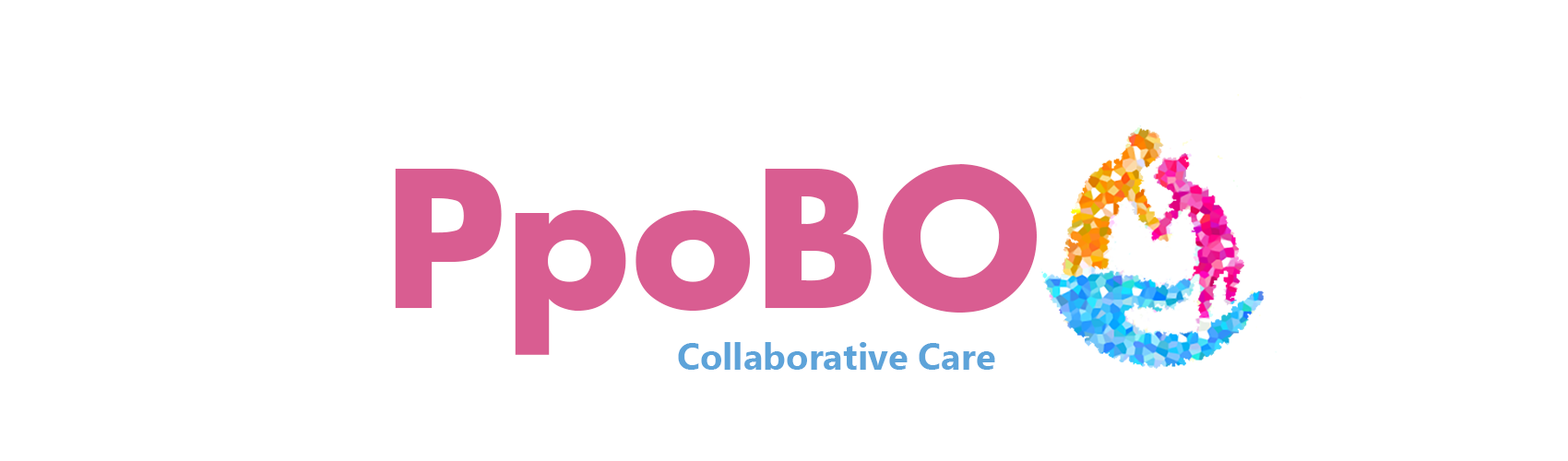
<style>
.page{position:relative;width:1568px;height:461px;background:#ffffff}
.page>*{position:absolute;margin:0}
.t1{font:184.5px "Futura-Bold";color:#d95d91}
.t2{font:36.9px "MicrosoftTaiLe-Bold";color:#5da3d9}
</style>
<div class="page">
<p class="t1" style="left:395px;top:164px;width:642px;height:191px">PpoBO</p>
<p class="t2" style="left:678px;top:342px;width:317px;height:28px">Collaborative Care</p>
</div>
